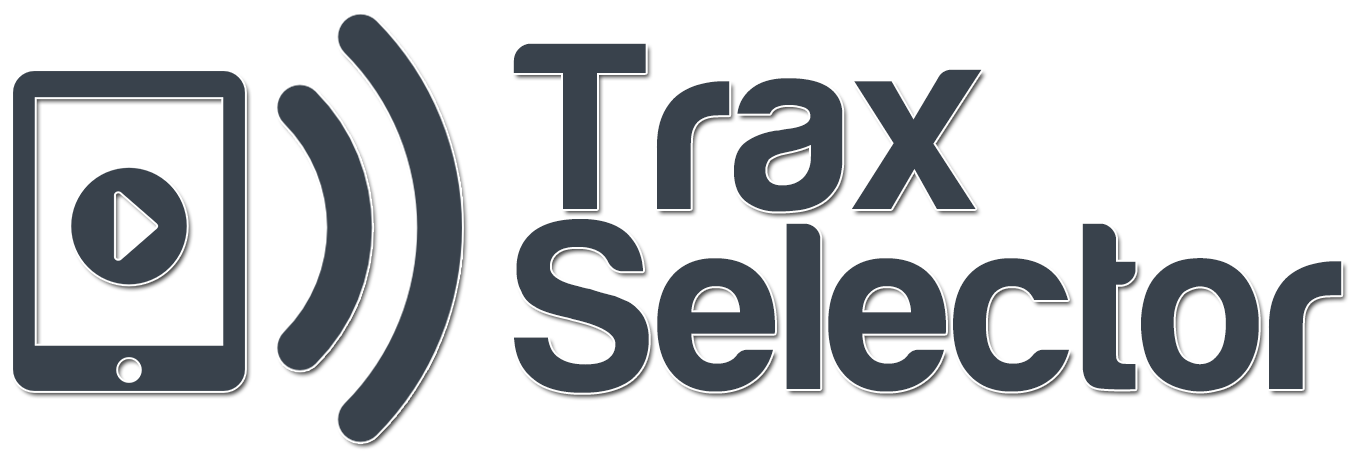
<style>
.page{position:relative;width:1354px;height:456px;background:#ffffff}
.page>*{position:absolute;margin:0}
.t1{font:246.1px/180.5px "Harabara";letter-spacing:0.02em;color:#39424c}
</style>
<div class="page">
<p class="t1" style="left:513px;top:43px;width:829px;height:350px">Trax<br>Selector</p>
</div>
